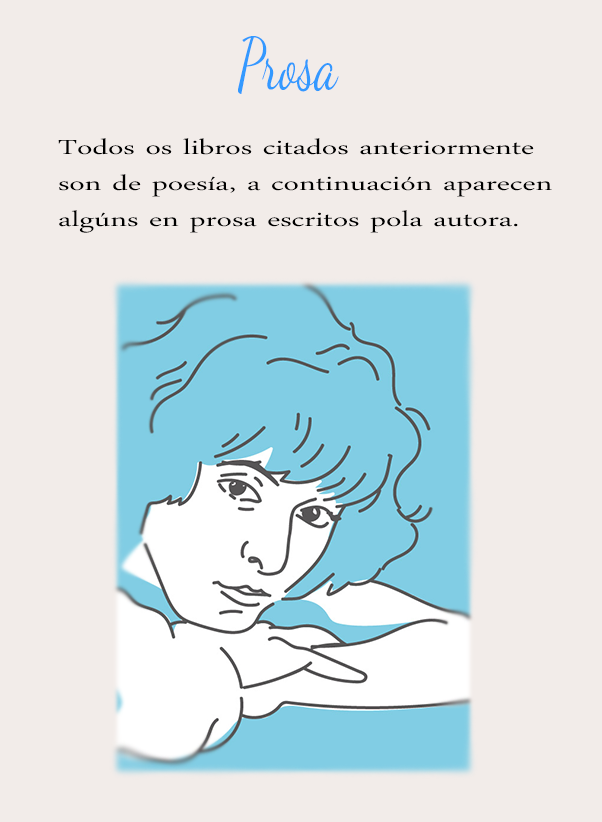
<style>
.page{position:relative;width:602px;height:822px;background:#f2ece9}
.page>*{position:absolute;margin:0}
.t1{font:72px "DancingScript-Regular";color:#3399ff;scale:0.69 1}
.t2{font:30px "DaunPenh";color:#000000;scale:1.47 1}
</style>
<div class="page">
<p class="t1" style="left:238px;top:36px;width:101px;height:58px">Prosa</p>
<p class="t2" style="left:58px;top:138px;width:494px;height:95px">Todos os libros citados anteriormente son de poesía, a continuación aparecen algúns en prosa escritos pola autora.</p>
</div>
